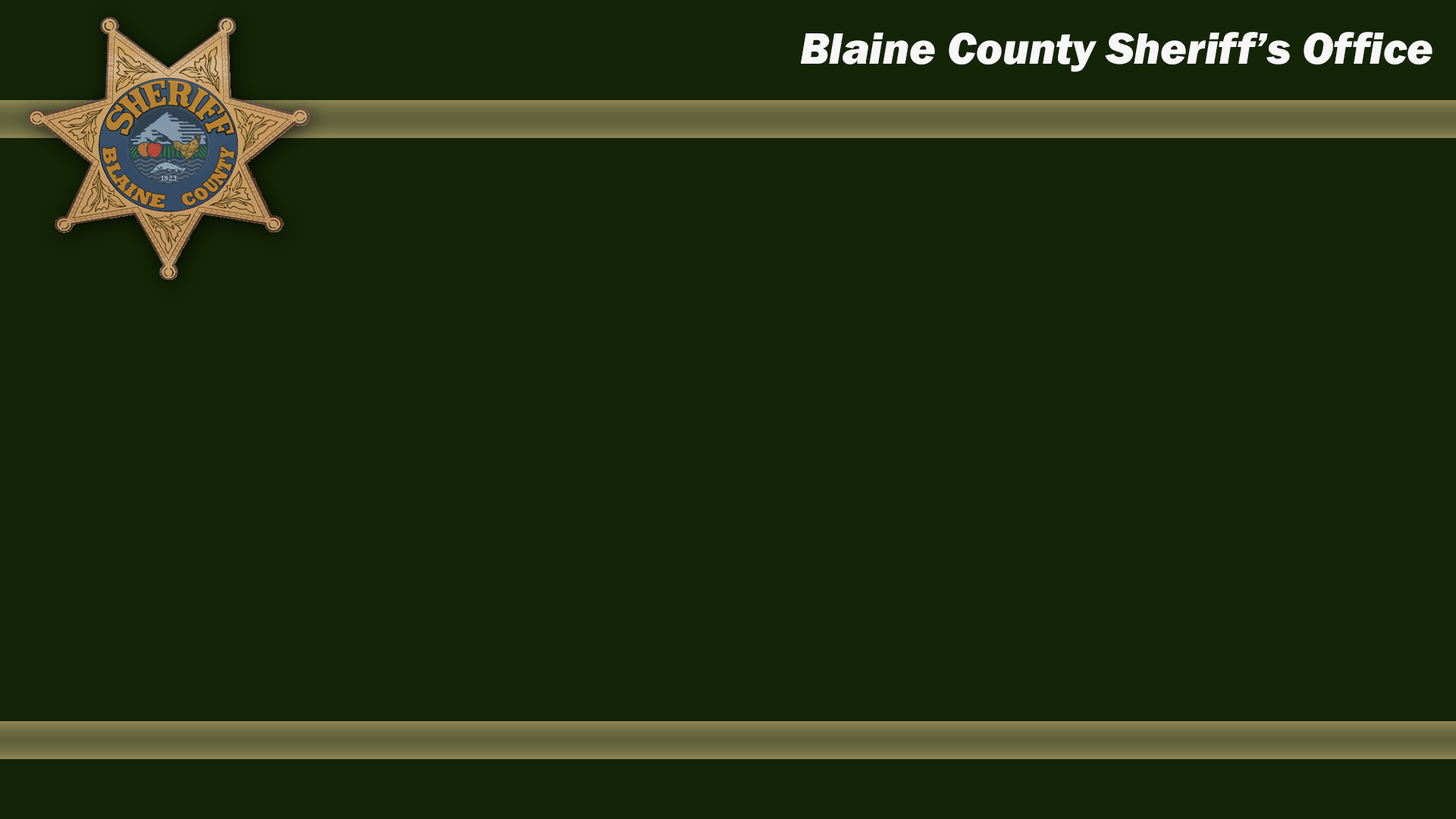
<style>
.page{position:relative;width:1456px;height:819px;background:#142406}
.page>*{position:absolute;margin:0}
.t1{font:45.5px "FranklinGothic-HeavyItalic";color:#ffffff}
</style>
<div class="page">
<p class="t1" style="left:801px;top:32px;width:631px;height:40px">Blaine County Sheriff’s Office</p>
</div>
